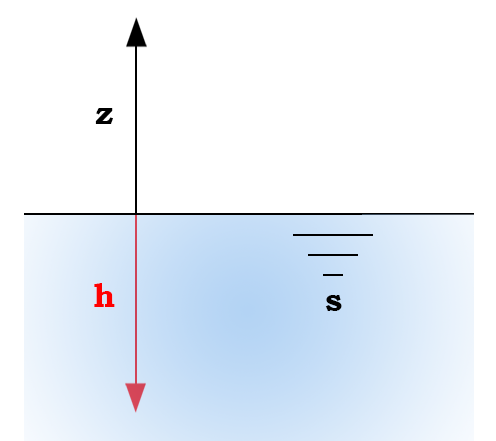
<style>
.page{position:relative;width:496px;height:441px;background:#ffffff}
.page>*{position:absolute;margin:0}
.t1{font:33.3px "BookmanOldStyle-Bold";color:#000000}
.t2{font:33.3px "BookmanOldStyle-Bold";color:#ff0000}
</style>
<div class="page">
<p class="t1" style="left:95px;top:108px;width:18px;height:16px">z</p>
<p class="t2" style="left:94px;top:283px;width:21px;height:24px">h</p>
<p class="t1" style="left:325px;top:295px;width:17px;height:16px">s</p>
</div>
